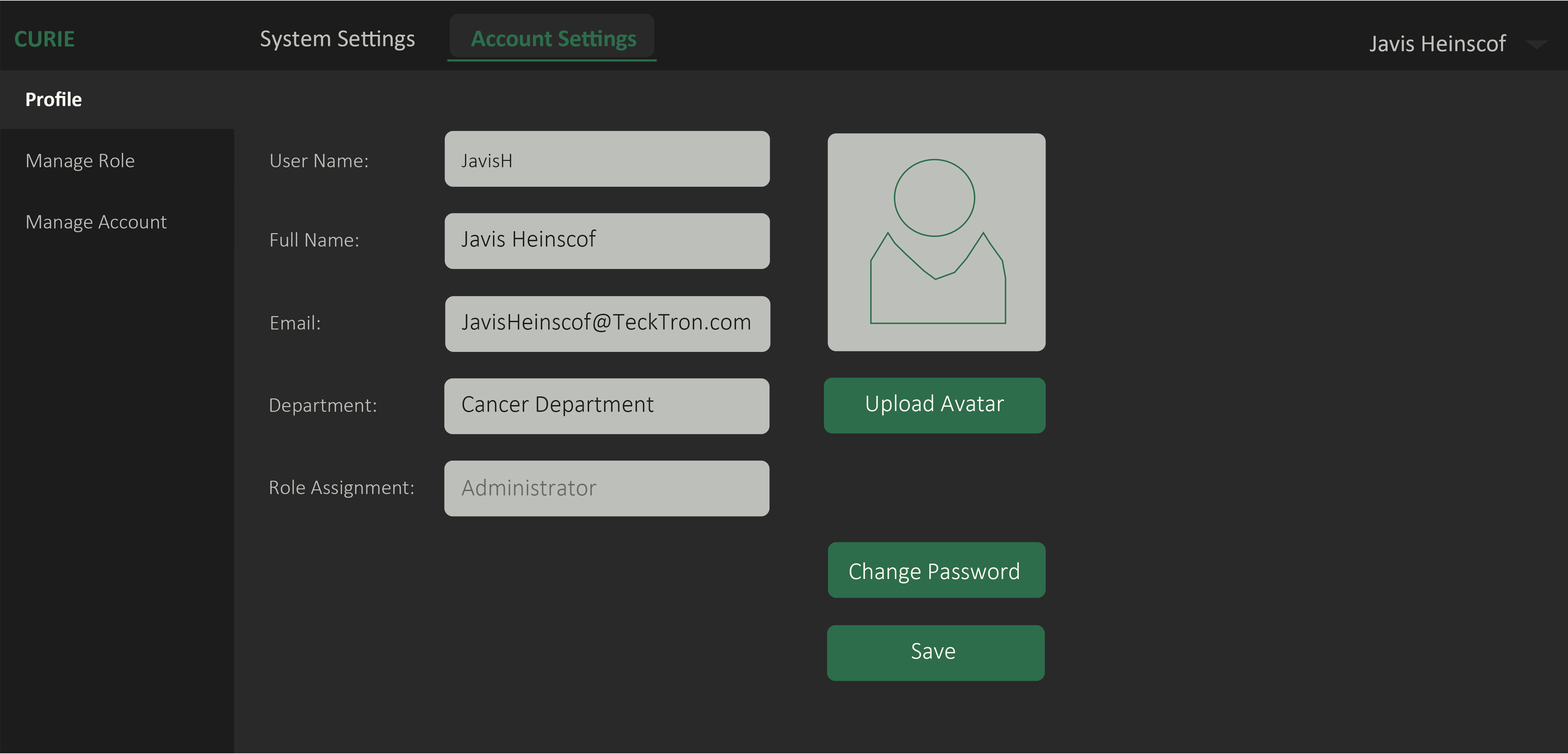
<style>
.page{position:relative;width:1568px;height:754px;background:#292929}
.page>*{position:absolute;margin:0}
.t1{font:24.4px "Calibri-Bold";color:#2d6d4b}
.t2{font:24.4px "Calibri";color:#bdc0ba}
.t3{font:24.4px "Calibri-Bold";letter-spacing:-0.008em;color:#2d6d4b}
.t4{font:24.4px "Calibri";letter-spacing:-0.016em;color:#bdc0ba}
.t5{font:24.4px "Calibri";letter-spacing:-0.007em;color:#bdc0ba}
.t6{font:20.9px "Calibri-Bold";color:#fcfaf2}
.t7{font:20.9px "Calibri-Light";color:#bdc0ba}
.t8{font:20.9px "Calibri-Light";letter-spacing:0.004em;color:#bdc0ba}
.t9{font:20.9px "Calibri-Light";letter-spacing:0.004em;color:#1c1c1c}
.t10{font:24.4px "Calibri-Light";color:#1c1c1c}
.t11{font:24.4px "Calibri-Light";letter-spacing:-0.016em;color:#1c1c1c}
.t12{font:24.4px "Calibri-Light";letter-spacing:-0.007em;color:#1c1c1c}
.t13{font:24.4px "Calibri-Light";color:#fcfaf2}
.t14{font:24.4px "Calibri-Light";color:#686868}
</style>
<div class="page">
<p class="t1" style="left:15px;top:31px;width:59px;height:16px">CURIE</p>
<p class="t2" style="left:261px;top:30px;width:154px;height:21px">System Settings</p>
<p class="t3" style="left:471px;top:30px;width:165px;height:21px">Account Settings</p>
<p class="t2" style="left:1370px;top:34px;width:136px;height:18px">J<span class="t4">a</span>vis Heins<span class="t5">c</span>of</p>
<p class="t6" style="left:26px;top:91px;width:56px;height:15px">Profile</p>
<p class="t7" style="left:27px;top:153px;width:107px;height:18px">Manage Role</p>
<p class="t8" style="left:271px;top:154px;width:96px;height:13px">User Name:</p>
<p class="t9" style="left:462px;top:154px;width:49px;height:13px">JavisH</p>
<p class="t7" style="left:27px;top:215px;width:140px;height:17px">Manage Account</p>
<p class="t8" style="left:271px;top:232px;width:87px;height:15px">Full Name:</p>
<p class="t10" style="left:462px;top:230px;width:134px;height:17px">J<span class="t11">a</span>vis Heins<span class="t12">c</span>of</p>
<p class="t8" style="left:271px;top:315px;width:49px;height:15px">Email:</p>
<p class="t10" style="left:462px;top:313px;width:288px;height:19px">J<span class="t11">a</span>visHeins<span class="t12">c</span>of@TeckTron.com</p>
<p class="t8" style="left:270px;top:399px;width:106px;height:17px">Department:</p>
<p class="t10" style="left:462px;top:396px;width:192px;height:20px">Cancer Department</p>
<p class="t13" style="left:866px;top:395px;width:138px;height:21px">Upload Avatar</p>
<p class="t8" style="left:270px;top:480px;width:143px;height:18px">Role Assignment:</p>
<p class="t14" style="left:462px;top:479px;width:134px;height:17px">Administrator</p>
<p class="t13" style="left:849px;top:563px;width:170px;height:21px">Change Password</p>
<p class="t13" style="left:912px;top:643px;width:43px;height:16px">Save</p>
</div>
